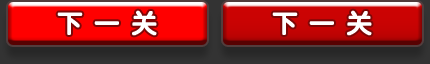
<style>
.page{position:relative;width:430px;height:64px}
.page>*{position:absolute;margin:0}
.t1{font:26px "JCuYuan";letter-spacing:0.4em;color:#ffffff;font-weight:bold}
</style>
<div class="page">
<p class="t1" style="left:57px;top:10px;width:100px;height:26px">下一关</p>
<p class="t1" style="left:272px;top:10px;width:100px;height:26px">下一关</p>
</div>
